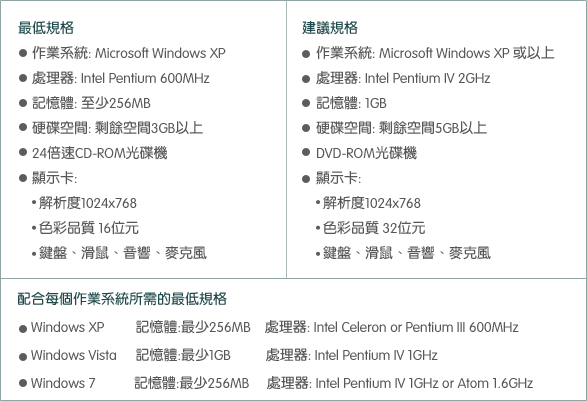
<style>
.page{position:relative;width:587px;height:401px;background:#ffffff}
.page>*{position:absolute;margin:0}
.t1{font:14px/25px "VAGRounded-Light";color:#585656}
.t2{font:14px/25px "ARYuanB5-Bold";color:#204a4c}
.t3{font:14px/25px "ARYuanB5-Bold";color:#585656}
.t4{font:14px/28px "VAGRounded-Light";color:#585656}
.t5{font:14px/28px "ARYuanB5-Bold";color:#204a4c}
.t6{font:14px/28px "ARYuanB5-Bold";color:#585656}
</style>
<div class="page">
<p class="t1" style="left:18px;top:21px;width:208px;height:239px"><span class="t2">最低規格<br></span><span class="t3">  作業系統</span>: Microsoft Windows XP <br><span class="t3">  處理器</span>: Intel Pentium 600MHz<br><span class="t3">  記憶體</span>: <span class="t3">至少</span>256MB<br><span class="t3">  硬碟空間</span>: <span class="t3">剩餘空間</span>3GB<span class="t3">以上</span><br>    24<span class="t3">倍速</span>CD-ROM<span class="t3">光碟機<br>  顯示卡</span>: <br><span class="t3">   解析度</span>1024x768<br><span class="t3">   色彩品質</span> 16<span class="t3">位元<br>   鍵盤、滑鼠、音響、麥克風</span></p>
<p class="t1" style="left:302px;top:21px;width:253px;height:239px"><span class="t2">建議規格<br></span><span class="t3">  作業系統</span>: Microsoft Windows XP <span class="t3">或以上<br>  處理器</span>: Intel Pentium IV 2GHz<br><span class="t3">  記憶體</span>: 1GB<br><span class="t3">  硬碟空間</span>: <span class="t3">剩餘空間</span>5GB<span class="t3">以上</span><br>    DVD-ROM<span class="t3">光碟機<br>  顯示卡</span>: <br><span class="t3">   解析度</span>1024x768<br><span class="t3">   色彩品質</span> 32<span class="t3">位元<br>   鍵盤、滑鼠、音響、麥克風</span></p>
<p class="t4" style="left:17px;top:292px;width:516px;height:98px"><span class="t5">配合每個作業系統所需的最低規格<br></span>    Windows XP         <span class="t6">記憶體</span>:<span class="t6">最少</span>256MB    <span class="t6">處理器</span>: Intel Celeron or Pentium III 600MHz<br>    Windows Vista    <span class="t6">記憶體</span>:<span class="t6">最少</span>1GB          <span class="t6">處理器</span>: Intel Pentium IV 1GHz<br>    Windows 7           <span class="t6">記憶體</span>:<span class="t6">最少</span>256MB     <span class="t6">處理器</span>: Intel Pentium IV 1GHz or Atom 1.6GHz</p>
</div>
